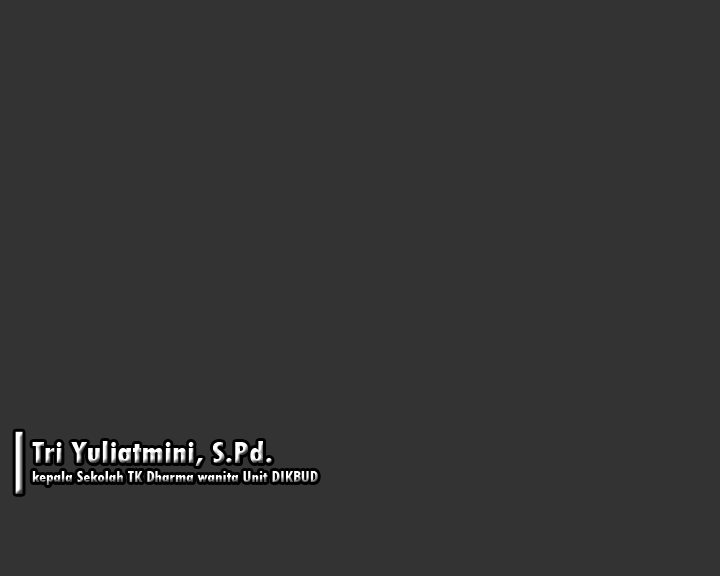
<style>
.page{position:relative;width:720px;height:576px;background:#333333}
.page>*{position:absolute;margin:0}
.t1{font:15.9px "TwCenMT-CondensedExtraBold"}
.t2{font:31.8px "TwCenMT-CondensedExtraBold"}
</style>
<div class="page">
<p class="t1" style="left:32px;top:441px;width:286px;height:44px"><span class="t2">Tri Yuliatmini, S.Pd.<br></span>kepala Sekolah TK Dharma wanita Unit DIKBUD</p>
</div>
